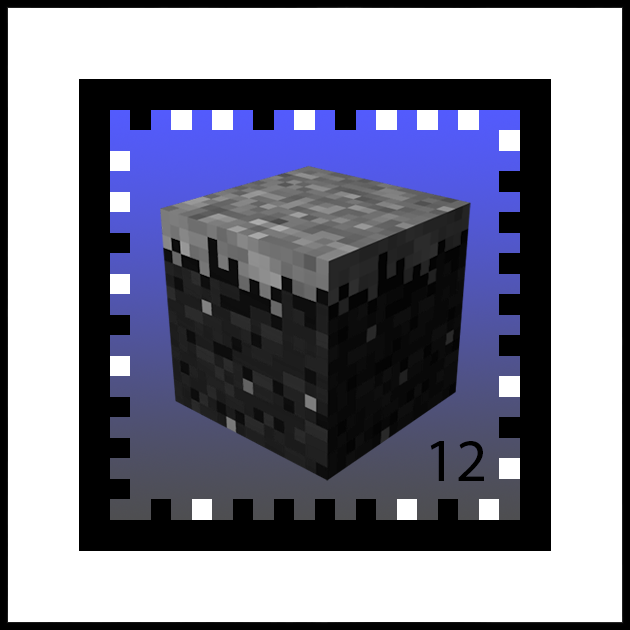
<style>
.page{position:relative;width:630px;height:630px;background:#ffffff}
.page>*{position:absolute;margin:0}
.t1{font:61.1px "MyriadPro-Regular";color:#000000;font-variant:small-caps}
</style>
<div class="page">
<p class="t1" style="left:430px;top:441px;width:54px;height:40px">12</p>
</div>
